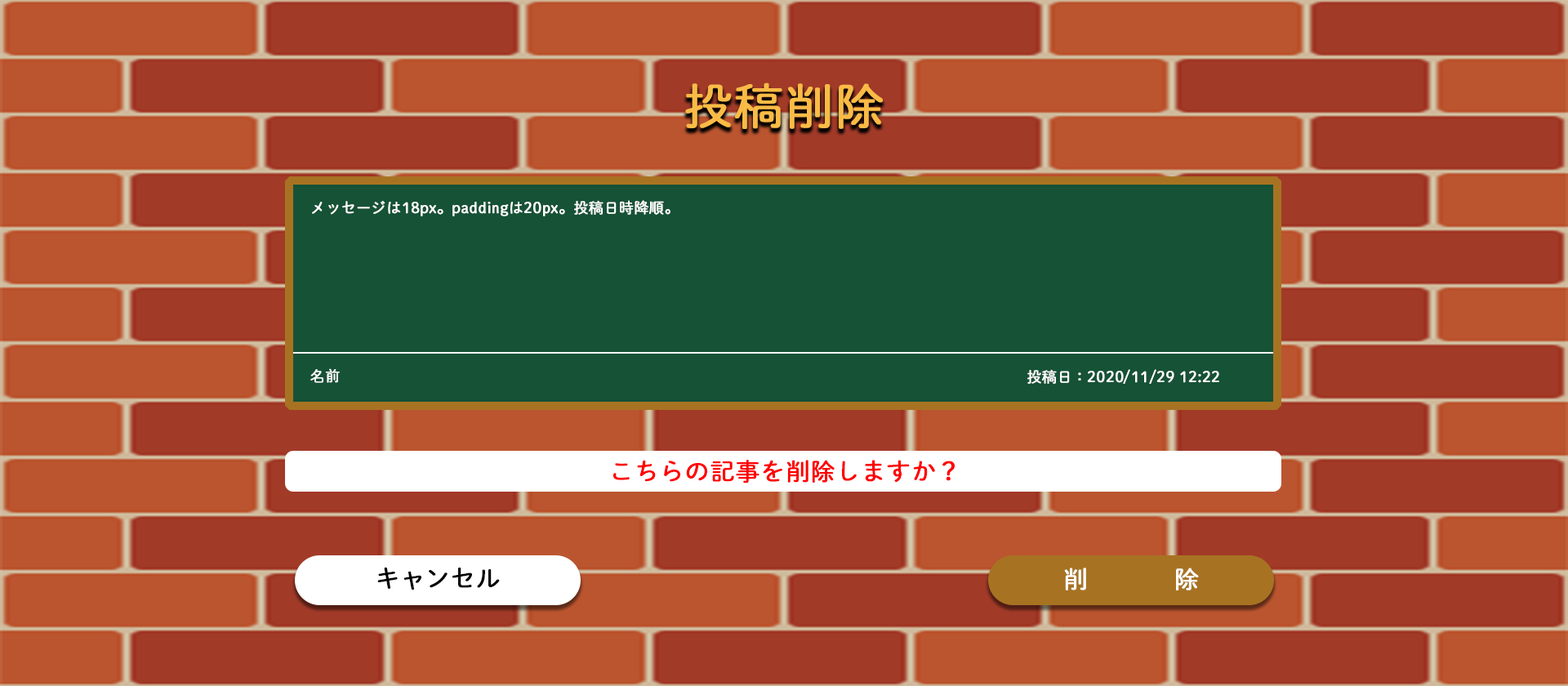
<style>
.page{position:relative;width:1568px;height:686px;background:#a23a28}
.page>*{position:absolute;margin:0}
.t1{font:49px "DNPShueiMGoStd-L";color:#fabb46;font-weight:bold}
.t2{font:14.7px "DNPShueiMGoStd-L";color:#ffffff;font-weight:bold}
.t3{font:24.5px "DNPShueiMGoStd-L";color:#ff0000;font-weight:bold}
.t4{font:24.5px "DNPShueiMGoStd-L";color:#000000;font-weight:bold}
.t5{font:24.5px "DNPShueiMGoStd-L";color:#fefefe;font-weight:bold}
</style>
<div class="page">
<p class="t1" style="left:685px;top:82px;width:198px;height:47px">投稿削除</p>
<p class="t2" style="left:312px;top:200px;width:358px;height:16px">メッセージは18px。paddingは20px。投稿日時降順。</p>
<p class="t2" style="left:310px;top:368px;width:30px;height:15px">名前</p>
<p class="t2" style="left:1027px;top:369px;width:192px;height:15px">投稿日：2020/11/29 12:22</p>
<p class="t3" style="left:613px;top:459px;width:342px;height:24px">こちらの記事を削除しますか？</p>
<p class="t4" style="left:377px;top:567px;width:123px;height:23px">キャンセル</p>
<p class="t5" style="left:1064px;top:568px;width:135px;height:23px">削除</p>
</div>
